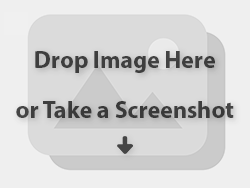
<style>
.page{position:relative;width:250px;height:188px;background:#efefef}
.page>*{position:absolute;margin:0}
.t1{font:24px/25px "MyriadPro-Bold";color:#3e3e3e}
</style>
<div class="page">
<p class="t1" style="left:16px;top:51px;width:218px;height:67px;text-align:center">Drop Image Here<br><br>or Take a Screenshot</p>
</div>
